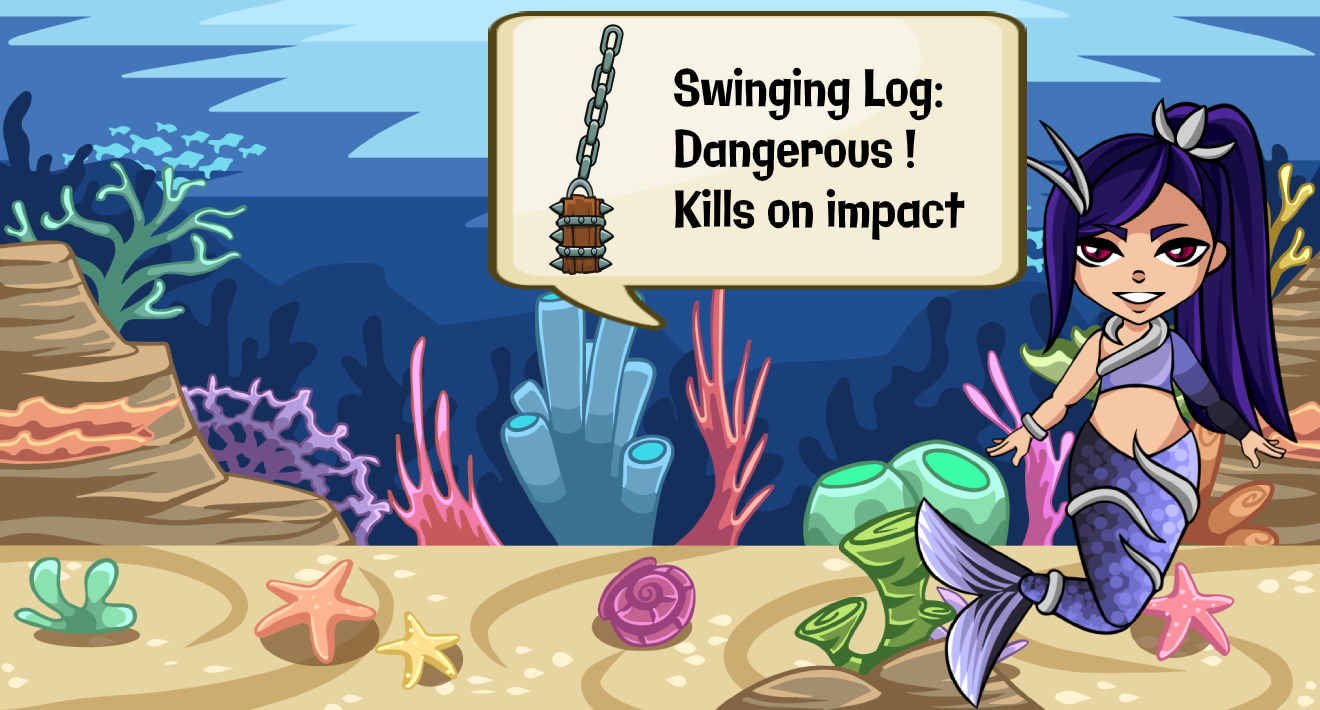
<style>
.page{position:relative;width:1320px;height:710px}
.page>*{position:absolute;margin:0}
.t1{font:50.5px "Galindo-Regular";color:#000000;scale:0.77 1}
</style>
<div class="page">
<p class="t1" style="left:673px;top:67px;width:292px;height:173px">Swinging Log: <br>Dangerous !<br>Kills on impact</p>
</div>
